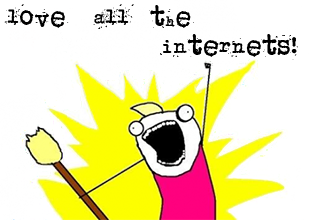
<style>
.page{position:relative;width:310px;height:220px;background:#ffffff}
.page>*{position:absolute;margin:0}
.t1{font:24.3px "junkostypewriter";color:#000000}
</style>
<div class="page">
<p class="t1" style="left:4px;top:4px;width:294px;height:56px">love    all   the<br>                       internets!</p>
</div>
